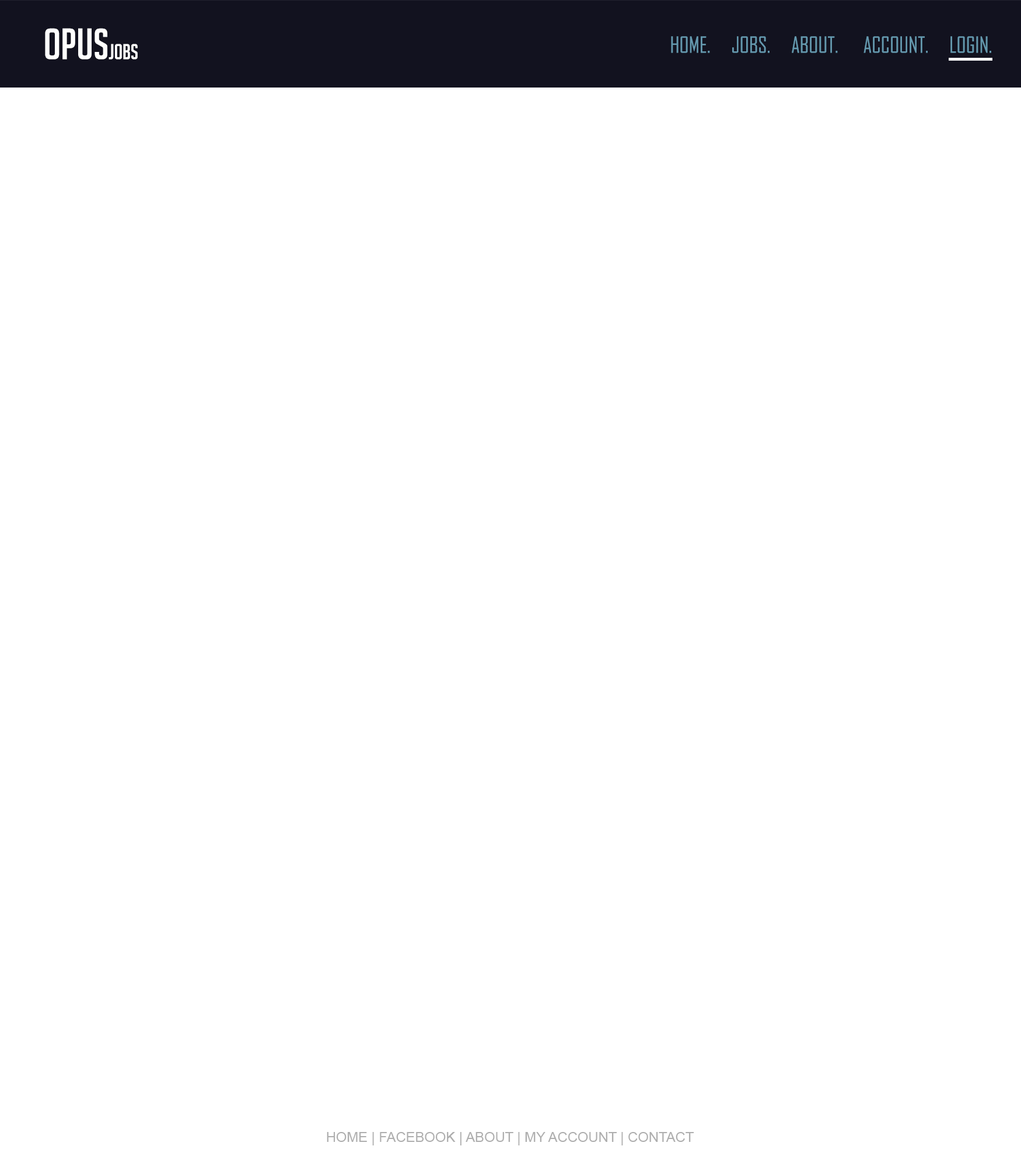
<style>
.page{position:relative;width:1021px;height:1167px;background:#ffffff}
.page>*{position:absolute;margin:0}
.t1{font:42.6px "BigNoodleTitling";color:#fefefe}
.t2{font:21px "BigNoodleTitling";color:#fefefe}
.t3{font:21.2px "AgencyFB-Reg";color:#6498ae}
.t4{font:13.9px "ArialMT";color:#aeaeae}
</style>
<div class="page">
<p class="t1" style="left:45px;top:28px;width:93px;height:32px">OPUS<span class="t2">Jobs</span></p>
<p class="t3" style="left:671px;top:36px;width:321px;height:17px">HOME.     JOBS.     ABOUT.      ACCOUNT.     LOGIN.</p>
<p class="t4" style="left:327px;top:1132px;width:368px;height:14px">HOME | FACEBOOK | ABOUT | MY ACCOUNT | CONTACT</p>
</div>
